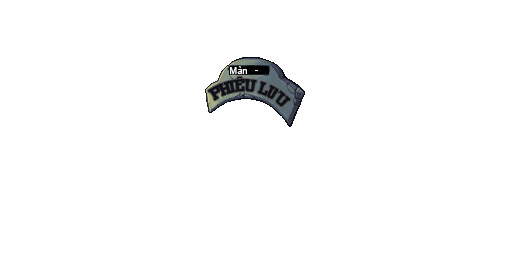
<style>
.page{position:relative;width:512px;height:256px;background:#ffffff}
.page>*{position:absolute;margin:0}
.t1{font:13.1px "SVN-Zero";color:#101018}
.t2{font:9.3px "ArialMT";color:#ffffff}
</style>
<div class="page">
<p class="t1" style="left:207px;top:76px;width:84px;height:31px;rotate:6deg">Phiêu Lưu</p>
<p class="t2" style="left:230px;top:66px;width:17px;height:8px">Màn</p>
</div>
